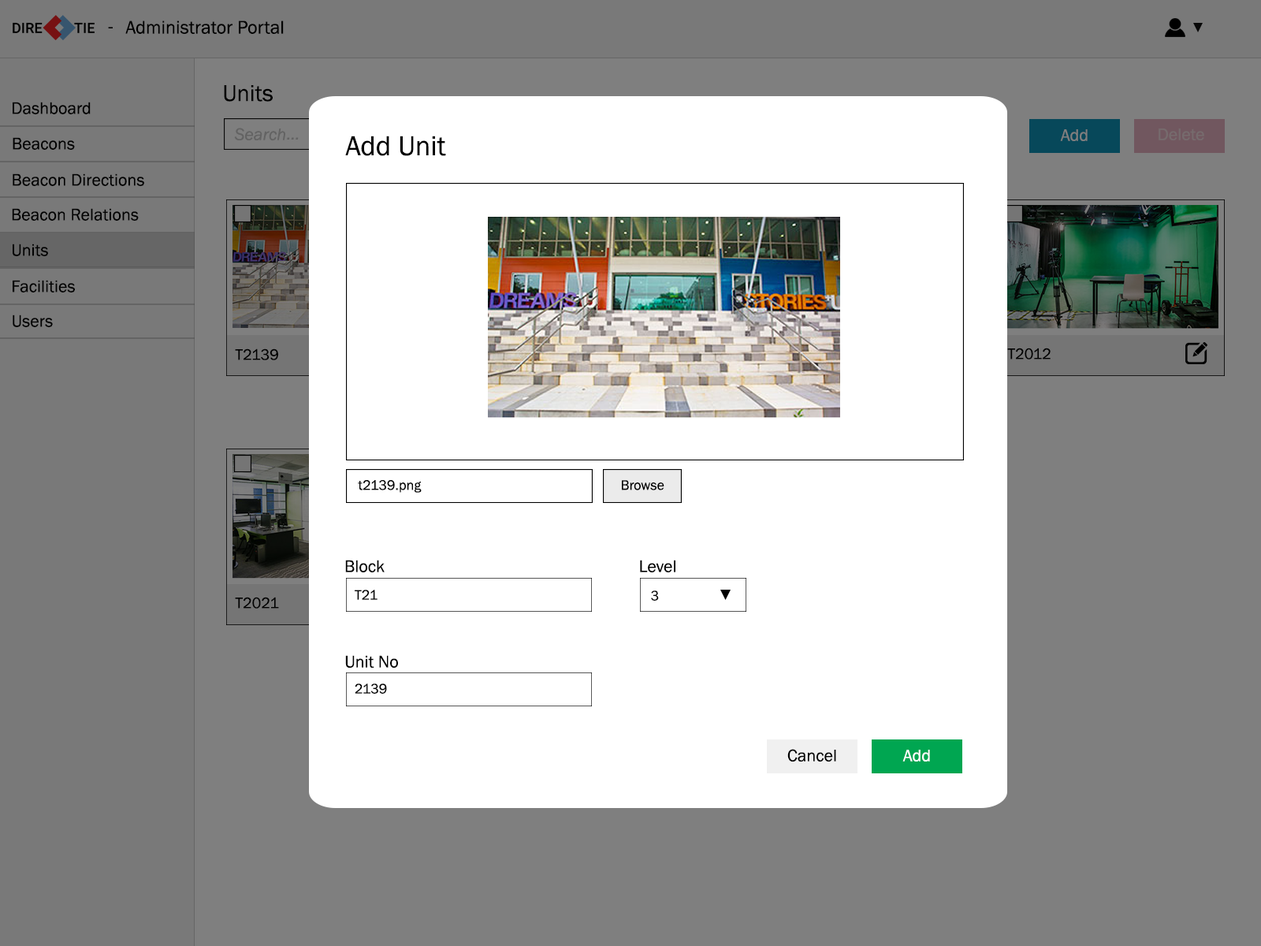
<style>
.page{position:relative;width:1261px;height:946px;background:#ffffff}
.page>*{position:absolute;margin:0}
.t1{font:18.9px "FranklinGothic-Book";color:#000000}
.t2{font:23.6px "FranklinGothic-Book";color:#000000}
.t3{font:17.3px "FranklinGothic-Book";color:#000000}
.t4{font:28.4px "FranklinGothic-Book";color:#000000}
.t5{font:17.3px "FranklinGothic-Book";color:#7f7f7f}
.t6{font:17.3px "FranklinGothic-Book";color:#766b6d}
.t7{font:15.7px "FranklinGothic-Book";color:#000000}
.t8{font:14.2px "FranklinGothic-Book";color:#000000}
.t9{font:17.3px "FranklinGothic-Book";color:#010101}
.t10{font:17.3px "FranklinGothic-Book";color:#fefefe}
</style>
<div class="page">
<p class="t1" style="left:108px;top:27px;width:5px;height:1px">-</p>
<p class="t1" style="left:125px;top:20px;width:159px;height:14px">Administrator Portal</p>
<p class="t2" style="left:224px;top:85px;width:49px;height:17px">Units</p>
<p class="t3" style="left:13px;top:102px;width:78px;height:12px">Dashboard</p>
<p class="t3" style="left:13px;top:137px;width:62px;height:13px">Beacons</p>
<p class="t4" style="left:345px;top:136px;width:101px;height:20px">Add Unit</p>
<p class="t5" style="left:1060px;top:129px;width:28px;height:12px">Add</p>
<p class="t6" style="left:1158px;top:128px;width:46px;height:12px">Delete</p>
<p class="t3" style="left:13px;top:173px;width:131px;height:13px">Beacon Directions</p>
<p class="t3" style="left:12px;top:208px;width:127px;height:13px">Beacon Relations</p>
<p class="t3" style="left:13px;top:244px;width:35px;height:12px">Units</p>
<p class="t3" style="left:13px;top:280px;width:62px;height:12px">Facilities</p>
<p class="t3" style="left:13px;top:314px;width:40px;height:13px">Users</p>
<p class="t7" style="left:235px;top:348px;width:43px;height:12px">T2139</p>
<p class="t7" style="left:1007px;top:348px;width:44px;height:11px">T2012</p>
<p class="t8" style="left:358px;top:480px;width:64px;height:13px">t2139.png</p>
<p class="t8" style="left:622px;top:480px;width:42px;height:10px">Browse</p>
<p class="t3" style="left:345px;top:560px;width:40px;height:12px">Block</p>
<p class="t3" style="left:640px;top:560px;width:35px;height:12px">Level</p>
<p class="t8" style="left:355px;top:589px;width:22px;height:11px">T21</p>
<p class="t8" style="left:651px;top:590px;width:8px;height:11px">3</p>
<p class="t7" style="left:235px;top:597px;width:44px;height:11px">T2021</p>
<p class="t3" style="left:345px;top:655px;width:53px;height:12px">Unit No</p>
<p class="t8" style="left:355px;top:683px;width:32px;height:11px">2139</p>
<p class="t9" style="left:787px;top:749px;width:49px;height:12px">Cancel</p>
<p class="t10" style="left:902px;top:749px;width:28px;height:12px">Add</p>
</div>
